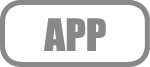
<style>
.page{position:relative;width:150px;height:67px;background:#ffffff}
.page>*{position:absolute;margin:0}
.t1{font:41px "Impact";color:#888888}
</style>
<div class="page">
<p class="t1" style="left:44px;top:18px;width:62px;height:33px">APP</p>
</div>
